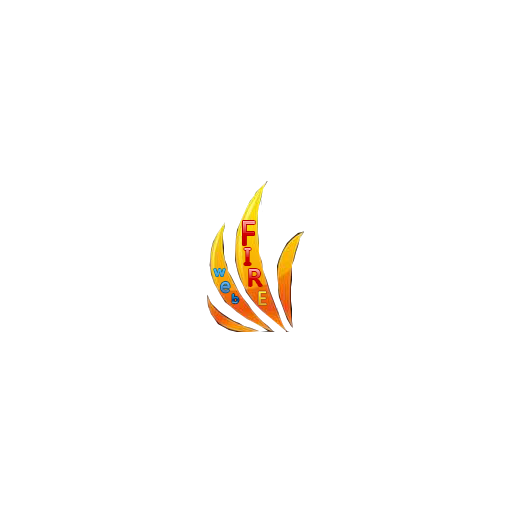
<style>
.page{position:relative;width:512px;height:512px;background:#ffffff}
.page>*{position:absolute;margin:0}
.t1{font:30.6px "MicrosoftYaHei"}
.t2{font:23.4px "MicrosoftYaHei"}
.t3{font:13.5px "MicrosoftYaHei";color:#36b5f4;scale:1.03 1}
.t4{font:22.5px "MicrosoftYaHei"}
.t5{font:18px "MicrosoftYaHei"}
.t6{font:10.8px "MicrosoftYaHei";color:#0e59a6}
</style>
<div class="page">
<p class="t1" style="left:243px;top:221px;width:12px;height:24px">F</p>
<p class="t2" style="left:244px;top:248px;width:7px;height:17px">I</p>
<p class="t3" style="left:214px;top:269px;width:11px;height:7px">w</p>
<p class="t4" style="left:249px;top:269px;width:13px;height:17px">R</p>
<p class="t5" style="left:220px;top:281px;width:10px;height:12px">e</p>
<p class="t6" style="left:232px;top:294px;width:7px;height:10px">b</p>
<p class="t5" style="left:258px;top:291px;width:9px;height:15px">E</p>
</div>
